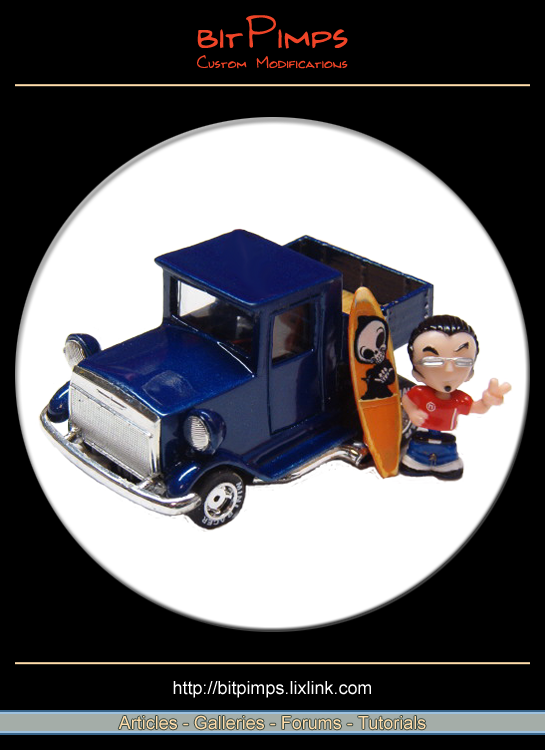
<style>
.page{position:relative;width:545px;height:750px;background:#000000}
.page>*{position:absolute;margin:0}
.t1{font:48px "Kilroy-WasHere";color:#ef4427}
.t2{font:18px "Kilroy-WasHere";color:#ef4427}
.t3{font:18px "ArialMT";color:#ffffff}
.t4{font:18px "ArialMT";color:#ffddab}
</style>
<div class="page">
<p class="t1" style="left:197px;top:15px;width:151px;height:34px">bitPimps</p>
<p class="t2" style="left:197px;top:55px;width:151px;height:14px">Custom Modifications</p>
<p class="t3" style="left:173px;top:681px;width:198px;height:17px">http://bitpimps.lixlink.com</p>
<p class="t4" style="left:118px;top:715px;width:308px;height:15px">Articles - Galleries - Forums - Tutorials</p>
</div>
